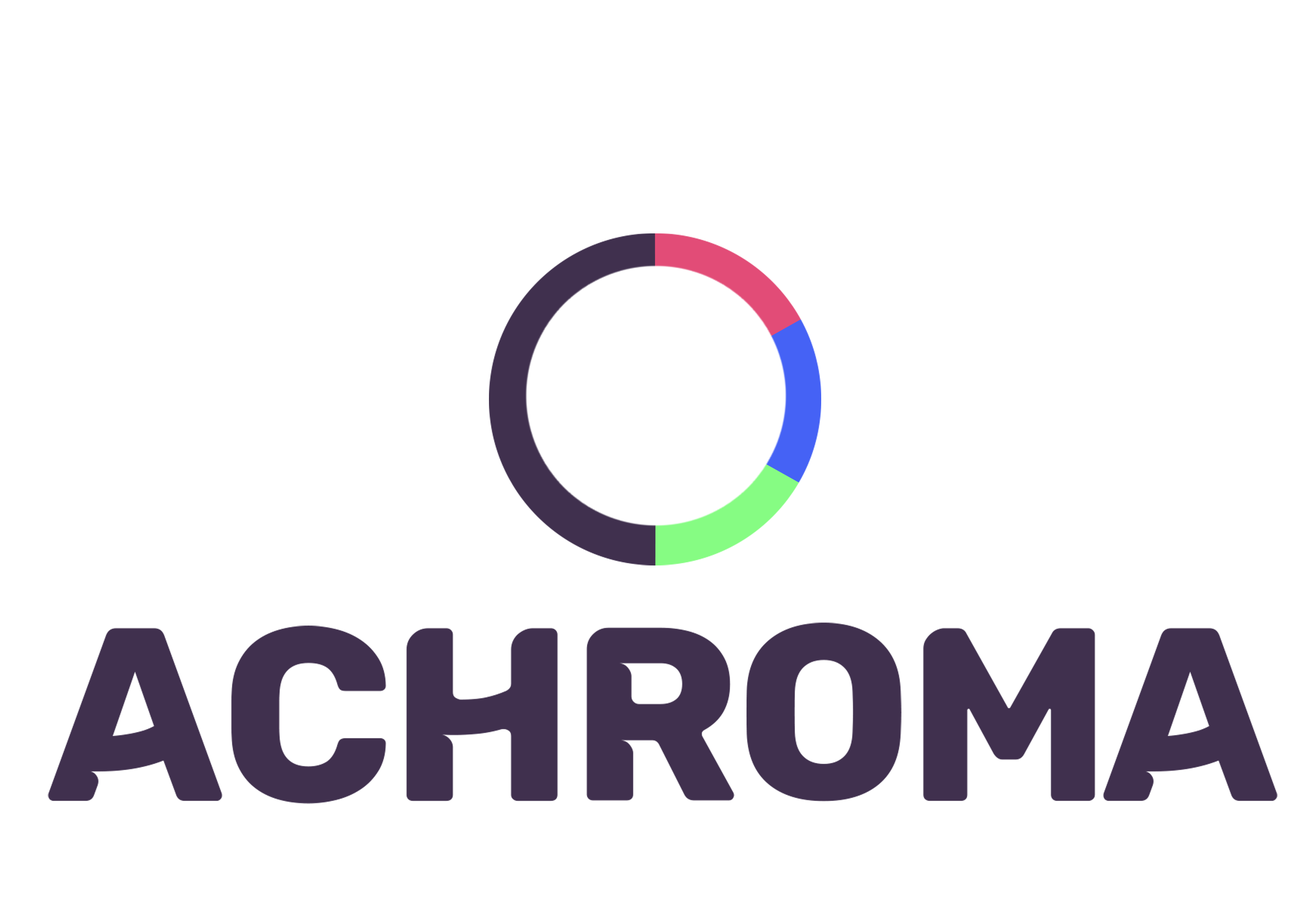
<style>
.page{position:relative;width:1314px;height:907px;background:#ffffff}
.page>*{position:absolute;margin:0}
.t1{font:247.9px "Cunia";letter-spacing:-0.02em;color:#40304e}
.t2{font:247.9px "Cunia";letter-spacing:-0.04em;color:#40304e}
</style>
<div class="page">
<p class="t1" style="left:48px;top:626px;width:1230px;height:178px">achr <span class="t2">   ma</span></p>
<p class="t1" style="left:747px;top:623px;width:154px;height:179px">o</p>
</div>
